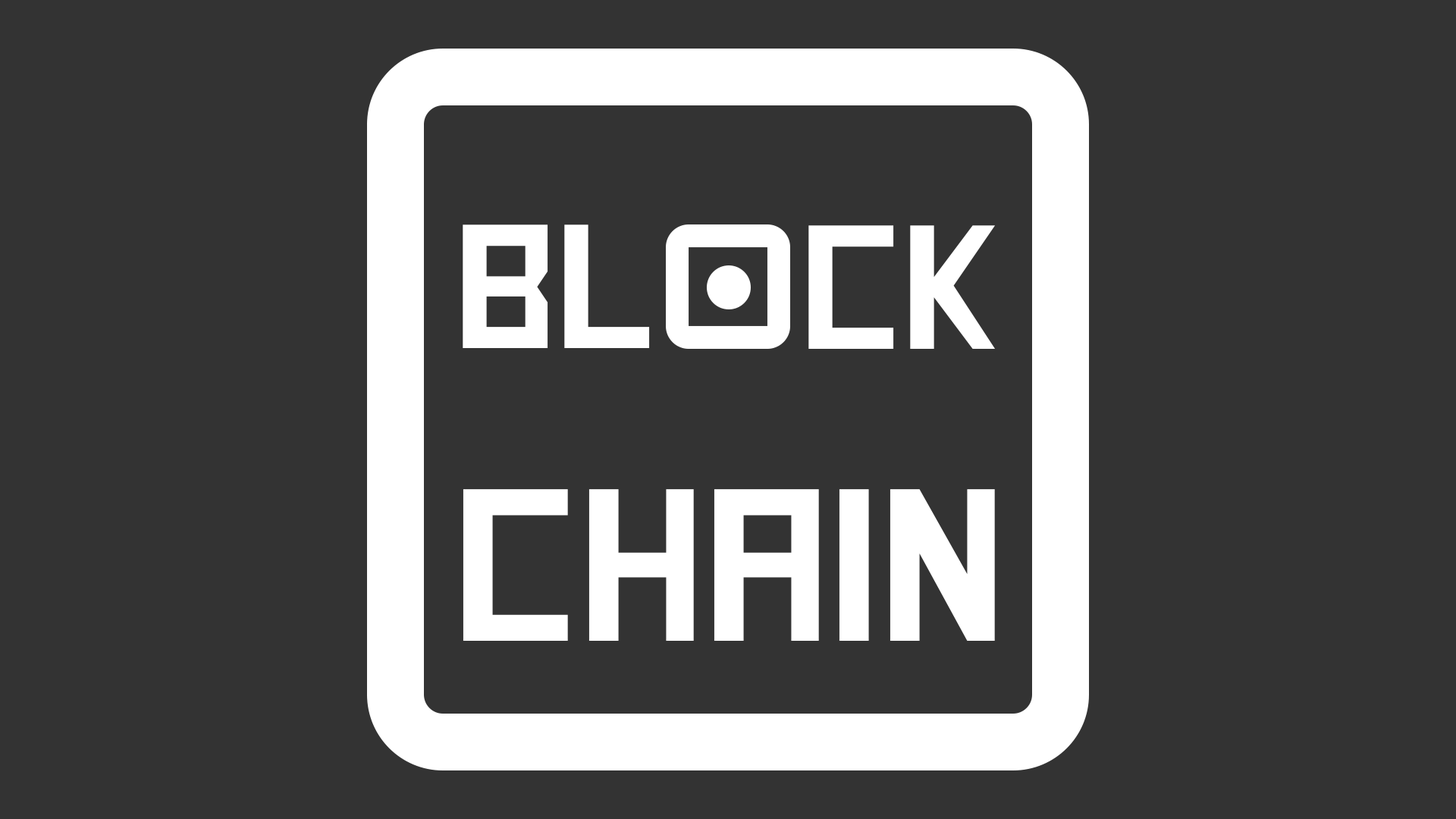
<style>
.page{position:relative;width:1456px;height:819px;background:#333333}
.page>*{position:absolute;margin:0}
.t1{font:175.6px "SquareFont";color:#ffffff}
.t2{font:216.2px "SquareFont";color:#ffffff}
</style>
<div class="page">
<p class="t1" style="left:463px;top:224px;width:187px;height:124px">BL</p>
<p class="t1" style="left:808px;top:225px;width:188px;height:124px">CK</p>
<p class="t2" style="left:463px;top:489px;width:532px;height:152px">CHAIN</p>
</div>
